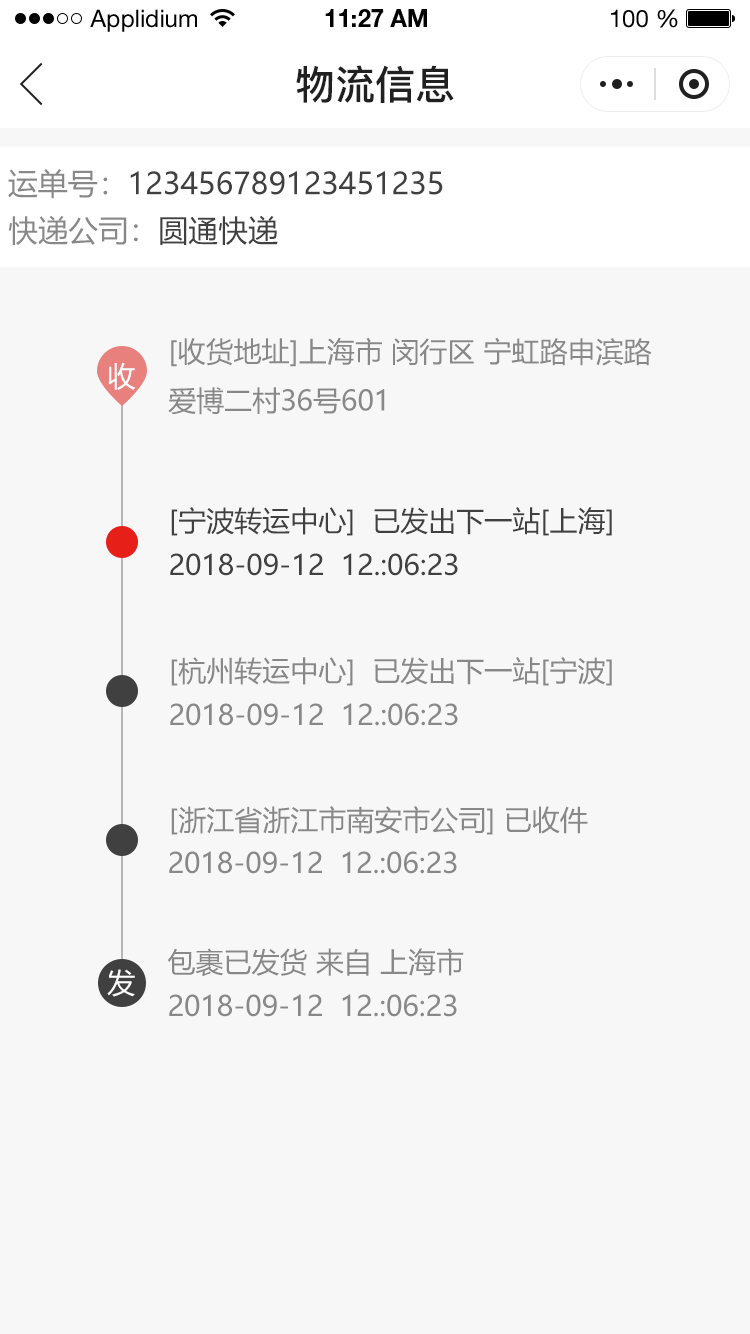
<style>
.page{position:relative;width:750px;height:1334px;background:#f7f7f7}
.page>*{position:absolute;margin:0}
.t1{font:24px "HelveticaNeueLTStd-Roman";color:#000000}
.t2{font:24px "HelveticaNeueLTStd-Bd";color:#000000}
.t3{font:40px "PingFang-SC-Bold";color:#202020;text-transform:uppercase}
.t4{font:30px "MicrosoftYaHei";color:#404040;text-transform:uppercase}
.t5{font:30px "MicrosoftYaHei";color:#888888;text-transform:uppercase}
.t6{font:28px "MicrosoftYaHei";color:#888888;text-transform:uppercase}
.t7{font:28px "MicrosoftYaHei";color:#ffffff;text-transform:uppercase}
.t8{font:28px "MicrosoftYaHei";color:#404040;text-transform:uppercase}
</style>
<div class="page">
<p class="t1" style="left:90px;top:9px;width:107px;height:23px">Applidium</p>
<p class="t2" style="left:325px;top:9px;width:102px;height:18px">11:27 AM</p>
<p class="t1" style="left:611px;top:9px;width:67px;height:19px">100 %</p>
<p class="t3" style="left:296px;top:65px;width:158px;height:38px">物流信息</p>
<p class="t4" style="left:8px;top:169px;width:435px;height:30px"><span class="t5">运单号：</span>123456789123451235</p>
<p class="t5" style="left:8px;top:215px;width:270px;height:30px">快递公司：<span class="t4">圆通快递</span></p>
<p class="t6" style="left:168px;top:337px;width:484px;height:78px">[收货地址]上海市 闵行区 宁虹路申滨路<br>爱博二村36号601</p>
<p class="t7" style="left:108px;top:362px;width:28px;height:28px">收</p>
<p class="t8" style="left:171px;top:507px;width:441px;height:29px">[宁波转运中心]  已发出下一站[上海]</p>
<p class="t8" style="left:170px;top:553px;width:288px;height:23px">2018-09-12  12.:06:23</p>
<p class="t6" style="left:171px;top:657px;width:441px;height:29px">[杭州转运中心]  已发出下一站[宁波]</p>
<p class="t6" style="left:170px;top:703px;width:288px;height:23px">2018-09-12  12.:06:23</p>
<p class="t6" style="left:171px;top:806px;width:417px;height:29px">[浙江省浙江市南安市公司] 已收件</p>
<p class="t6" style="left:169px;top:851px;width:288px;height:23px">2018-09-12  12.:06:23</p>
<p class="t6" style="left:167px;top:948px;width:297px;height:29px">包裹已发货 来自 上海市</p>
<p class="t7" style="left:107px;top:969px;width:28px;height:28px">发</p>
<p class="t6" style="left:169px;top:994px;width:288px;height:23px">2018-09-12  12.:06:23</p>
</div>
